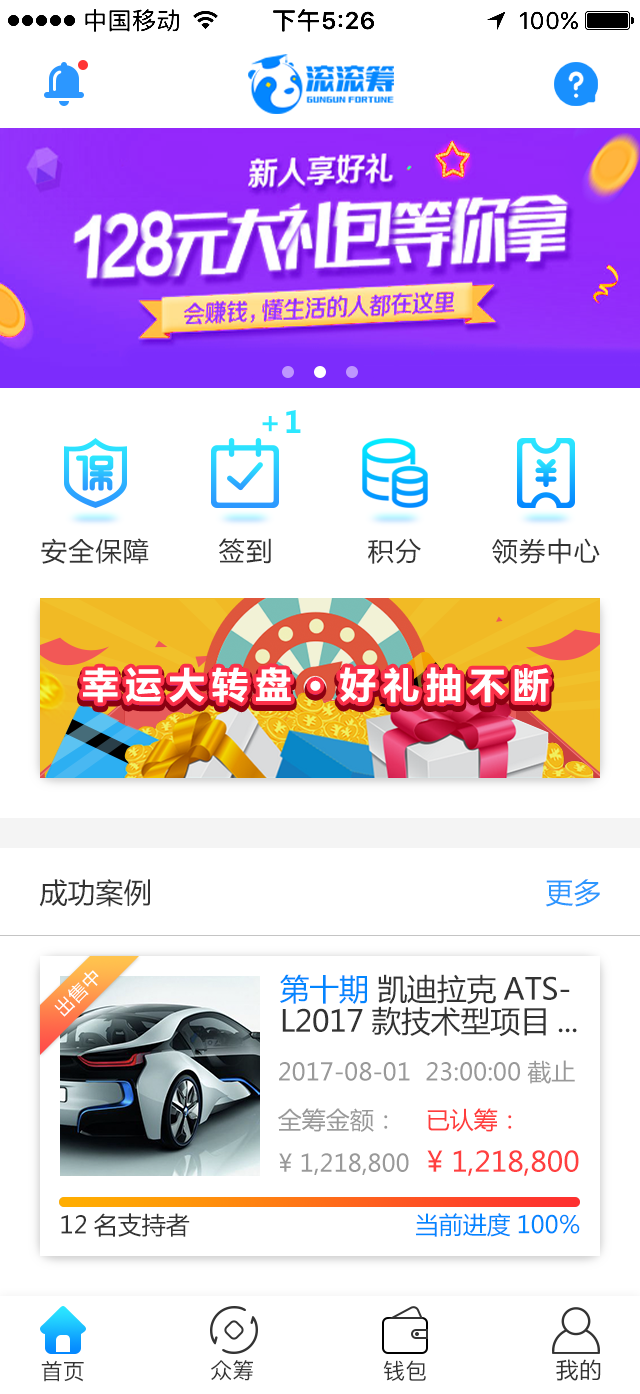
<style>
.page{position:relative;width:640px;height:1394px;background:#ffffff}
.page>*{position:absolute;margin:0}
.t1{font:30px "MicrosoftYaHei-Bold";letter-spacing:0.05em;color:#2ce8ff}
.t2{font:26px "MicrosoftYaHei";letter-spacing:0.05em;color:#333333}
.t3{font:36px "MicrosoftYaHei-Bold";letter-spacing:0.2em}
.t4{font:36px "MicrosoftYaHei-Bold";letter-spacing:0.2em;color:#ffffff}
.t5{font:28px "MicrosoftYaHei";color:#333333}
.t6{font:28px "MicrosoftYaHei";color:#2c97ff}
.t7{font:18px "MicrosoftYaHei";letter-spacing:0.05em;color:#ffffff}
.t8{font:30px/32px "MicrosoftYaHei";letter-spacing:-0.01em;color:#333333}
.t9{font:30px/32px "MicrosoftYaHei";letter-spacing:-0.01em;color:#0386ff}
.t10{font:24px "MicrosoftYaHei";color:#999999}
.t11{font:24px "MicrosoftYaHei";color:#ff3d3d}
.t12{font:28px "MicrosoftYaHei";color:#ff3f3f}
.t13{font:24px "MicrosoftYaHei";color:#333333}
.t14{font:24px "MicrosoftYaHei";color:#0386ff}
.t15{font:22px "PingFangSC-Regular";color:#333333}
.t16{font:22px "MicrosoftYaHei";letter-spacing:0.05em;color:#333333}
</style>
<div class="page">
<p class="t1" style="left:262px;top:410px;width:39px;height:23px">+1</p>
<p class="t2" style="left:41px;top:538px;width:108px;height:26px">安全保障</p>
<p class="t2" style="left:219px;top:538px;width:52px;height:26px">签到</p>
<p class="t2" style="left:368px;top:538px;width:53px;height:26px">积分</p>
<p class="t2" style="left:492px;top:538px;width:108px;height:26px">领券中心</p>
<p class="t3" style="left:83px;top:671px;width:466px;height:36px">幸运大转盘·好礼抽不断</p>
<p class="t4" style="left:83px;top:667px;width:466px;height:36px">幸运大转盘·好礼抽不断</p>
<p class="t5" style="left:39px;top:879px;width:111px;height:28px">成功案例</p>
<p class="t6" style="left:545px;top:879px;width:55px;height:28px">更多</p>
<p class="t7" style="left:54px;top:970px;width:45px;height:47px;rotate:-45deg">出售中</p>
<p class="t8" style="left:280px;top:974px;width:297px;height:63px"><span class="t9">第十期 </span>凯迪拉克ATS-<br>L2017款技术型项目...</p>
<p class="t10" style="left:279px;top:1060px;width:296px;height:24px">2017-08-01  23:00:00截止</p>
<p class="t10" style="left:278px;top:1108px;width:110px;height:24px">全筹金额：</p>
<p class="t11" style="left:427px;top:1108px;width:85px;height:24px">已认筹：</p>
<p class="t10" style="left:279px;top:1153px;width:130px;height:22px">¥ 1,218,800</p>
<p class="t12" style="left:427px;top:1150px;width:152px;height:26px">¥ 1,218,800</p>
<p class="t13" style="left:61px;top:1213px;width:129px;height:24px">12名支持者</p>
<p class="t14" style="left:416px;top:1213px;width:164px;height:24px">当前进度100%</p>
<p class="t15" style="left:41px;top:1360px;width:43px;height:22px">首页</p>
<p class="t15" style="left:211px;top:1360px;width:42px;height:21px">众筹</p>
<p class="t15" style="left:383px;top:1360px;width:43px;height:21px">钱包</p>
<p class="t16" style="left:556px;top:1359px;width:45px;height:22px">我的</p>
</div>
